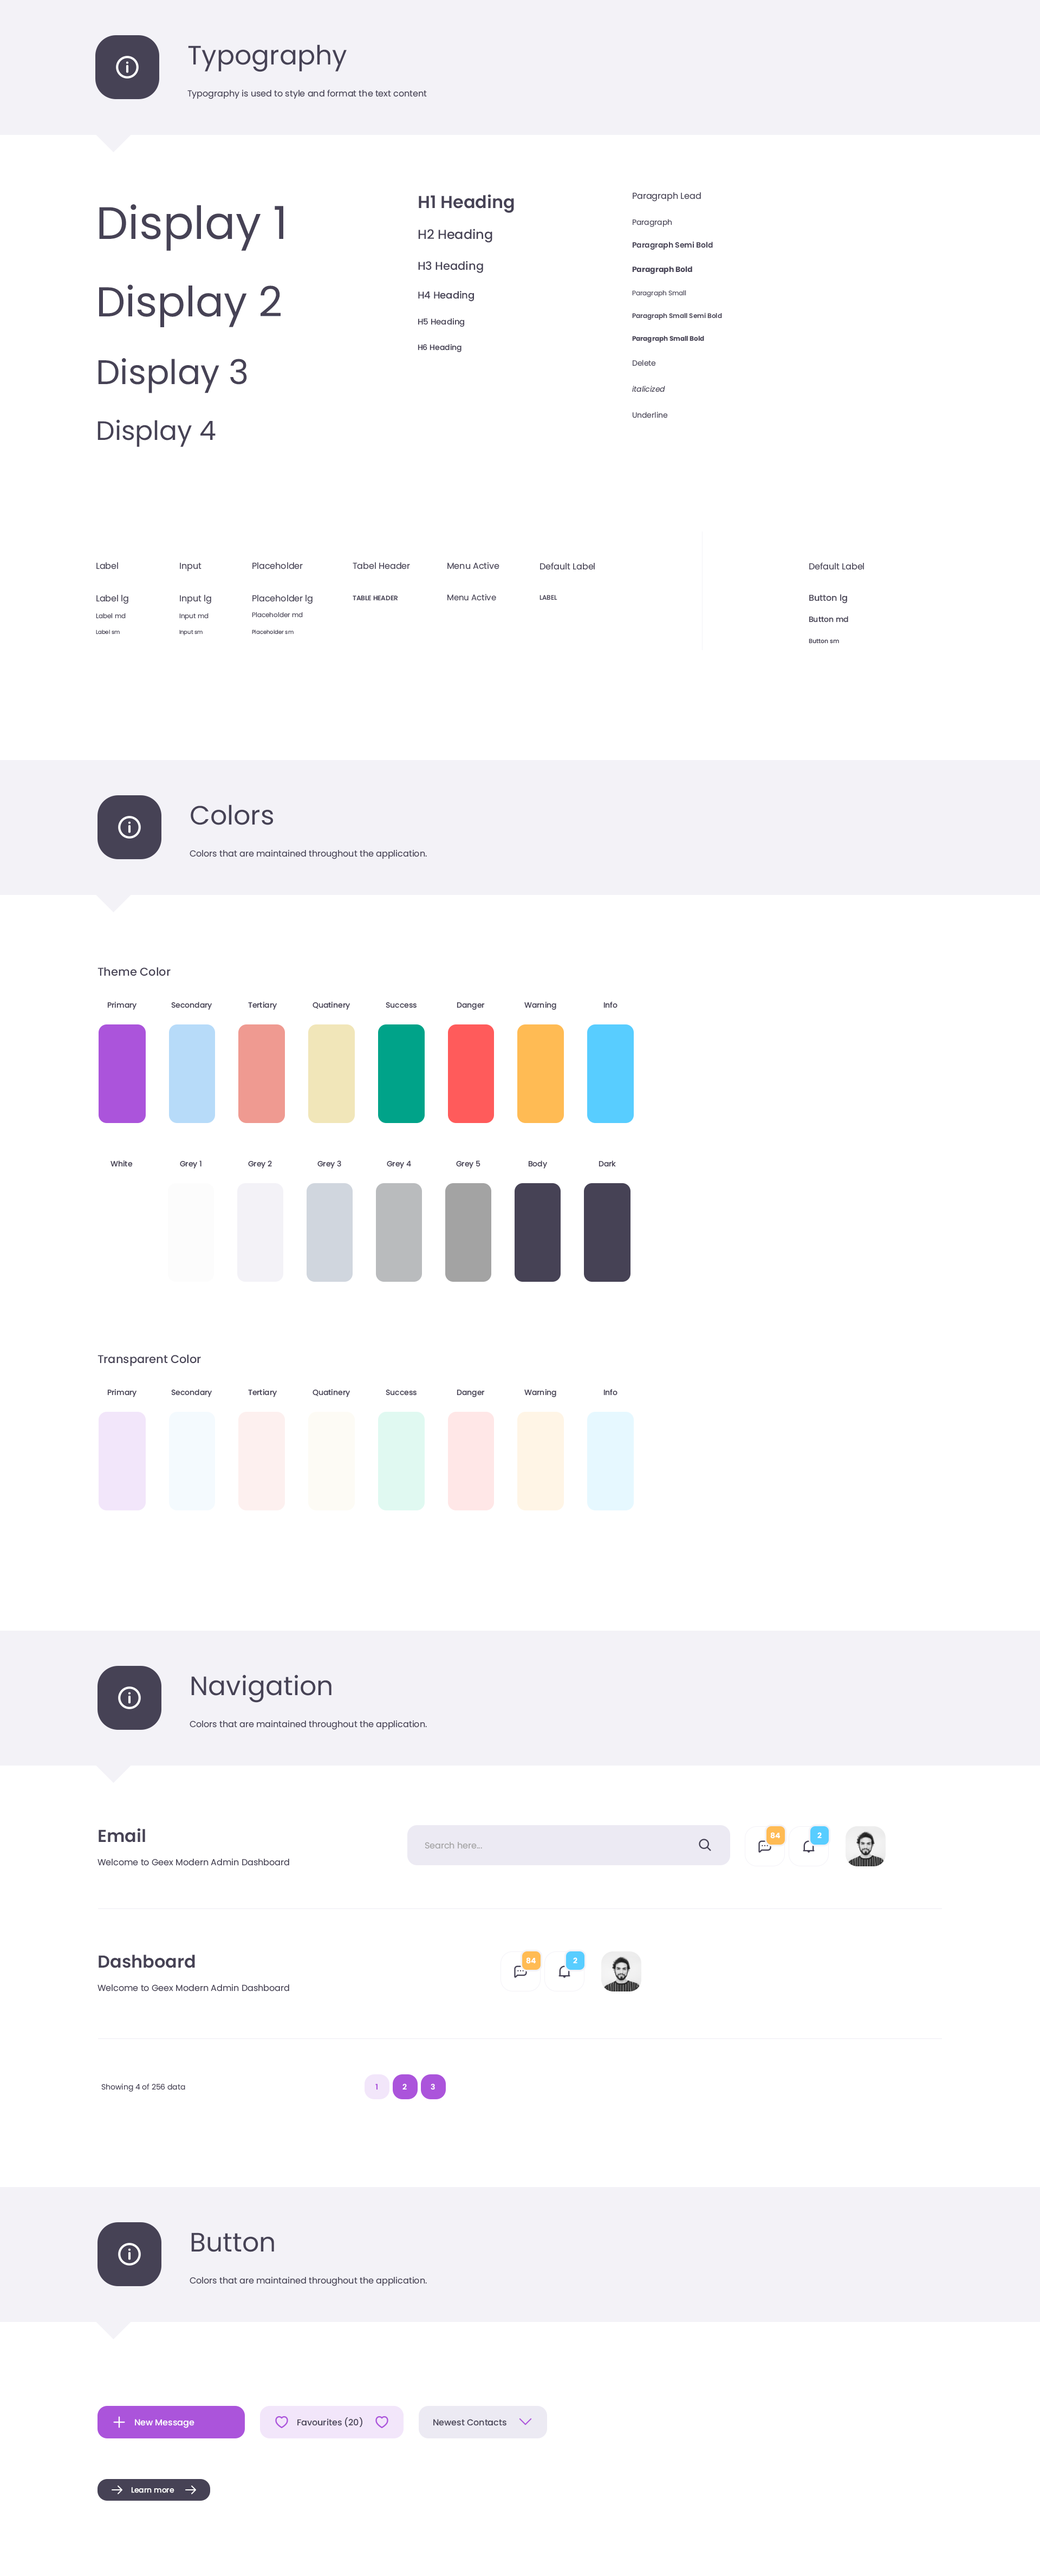
<style>
.page{position:relative;width:1040px;height:2576px;background:#ffffff}
.page>*{position:absolute;margin:0}
.t1{font:26.5px "Poppins-Regular";color:#464255}
.t2{font:8.7px "Poppins-Regular";color:#464255}
.t3{font:17.3px "Poppins-SemiBold";color:#464255}
.t4{font:45.5px "Poppins-Regular";color:#464255}
.t5{font:7.6px "Poppins-Regular";color:#464255}
.t6{font:13px "Poppins-Medium";color:#464255}
.t7{font:7.6px "Poppins-SemiBold";color:#464255}
.t8{font:11.4px "Poppins-Medium";color:#464255}
.t9{font:7.6px "Poppins-Bold";color:#464255}
.t10{font:41.7px "Poppins-Regular";color:#464255}
.t11{font:9.8px "Poppins-Medium";color:#464255}
.t12{font:6.5px "Poppins-Regular";color:#464255}
.t13{font:6.5px "Poppins-SemiBold";color:#464255}
.t14{font:8.1px "Poppins-Medium";color:#464255}
.t15{font:6.5px "Poppins-Bold";color:#464255}
.t16{font:7.6px "Poppins-Medium";color:#464255}
.t17{font:34.1px "Poppins-Regular";color:#464255}
.t18{font:7.6px "Poppins-Italic";color:#464255}
.t19{font:8.1px "Poppins-Regular";color:#464255}
.t20{font:6.5px "Poppins-SemiBold";color:#464255;text-transform:uppercase}
.t21{font:6.5px "Poppins-Medium";color:#464255;text-transform:uppercase}
.t22{font:8.7px "Poppins-Medium";color:#464255}
.t23{font:5.4px "Poppins-Regular";color:#464255}
.t24{font:6px "Poppins-Medium";color:#464255}
.t25{font:8.7px "Poppins-Regular";color:#a3a3a3}
.t26{font:7.6px "Poppins-Bold";color:#ffffff}
.t27{font:7.6px "Poppins-SemiBold";color:#ab54db}
.t28{font:7.6px "Poppins-SemiBold";color:#ffffff}
.t29{font:8.7px "Poppins-Medium";color:#ffffff}
.t30{font:7.6px "Poppins-Medium";color:#ffffff}
</style>
<div class="page">
<p class="t1" style="left:188px;top:44px;width:159px;height:28px">Typography</p>
<p class="t2" style="left:187px;top:89px;width:240px;height:10px">Typography is used to style and format the text content</p>
<p class="t3" style="left:419px;top:194px;width:95px;height:19px">H1 Heading</p>
<p class="t2" style="left:633px;top:192px;width:68px;height:10px">Paragraph Lead</p>
<p class="t4" style="left:99px;top:204px;width:184px;height:47px">Display 1</p>
<p class="t5" style="left:633px;top:219px;width:39px;height:8px">Paragraph</p>
<p class="t6" style="left:418px;top:229px;width:74px;height:14px">H2 Heading</p>
<p class="t7" style="left:632px;top:242px;width:81px;height:8px">Paragraph Semi Bold</p>
<p class="t8" style="left:418px;top:261px;width:65px;height:12px">H3 Heading</p>
<p class="t9" style="left:632px;top:266px;width:60px;height:8px">Paragraph Bold</p>
<p class="t10" style="left:99px;top:284px;width:182px;height:43px">Display 2</p>
<p class="t11" style="left:418px;top:291px;width:56px;height:10px">H4 Heading</p>
<p class="t12" style="left:632px;top:290px;width:54px;height:7px">Paragraph Small</p>
<p class="t13" style="left:632px;top:313px;width:90px;height:7px">Paragraph Small Semi Bold</p>
<p class="t14" style="left:418px;top:318px;width:46px;height:9px">H5 Heading</p>
<p class="t15" style="left:632px;top:336px;width:72px;height:7px">Paragraph Small Bold</p>
<p class="t16" style="left:418px;top:344px;width:44px;height:8px">H6 Heading</p>
<p class="t17" style="left:98px;top:358px;width:149px;height:35px">Display 3</p>
<p class="t5" style="left:633px;top:360px;width:23px;height:6px">Delete</p>
<p class="t18" style="left:632px;top:386px;width:33px;height:6px">italicized</p>
<p class="t5" style="left:632px;top:412px;width:36px;height:6px">Underline</p>
<p class="t1" style="left:98px;top:419px;width:118px;height:28px">Display 4</p>
<p class="t2" style="left:96px;top:562px;width:22px;height:7px">Label</p>
<p class="t2" style="left:180px;top:562px;width:22px;height:10px">Input</p>
<p class="t2" style="left:252px;top:562px;width:51px;height:7px">Placeholder</p>
<p class="t2" style="left:353px;top:562px;width:57px;height:7px">Tabel Header</p>
<p class="t2" style="left:447px;top:562px;width:52px;height:7px">Menu Active</p>
<p class="t2" style="left:540px;top:562px;width:55px;height:8px">Default Label</p>
<p class="t2" style="left:809px;top:562px;width:55px;height:8px">Default Label</p>
<p class="t19" style="left:447px;top:594px;width:49px;height:7px">Menu Active</p>
<p class="t2" style="left:96px;top:595px;width:32px;height:9px">Label lg</p>
<p class="t2" style="left:180px;top:595px;width:31px;height:9px">Input lg</p>
<p class="t2" style="left:252px;top:595px;width:61px;height:9px">Placeholder lg</p>
<p class="t20" style="left:353px;top:595px;width:45px;height:5px">Table Header</p>
<p class="t21" style="left:540px;top:595px;width:17px;height:5px">Label</p>
<p class="t22" style="left:809px;top:594px;width:38px;height:10px">Button lg</p>
<p class="t12" style="left:96px;top:613px;width:30px;height:6px">Label md</p>
<p class="t12" style="left:179px;top:613px;width:30px;height:7px">Input md</p>
<p class="t12" style="left:252px;top:612px;width:51px;height:6px">Placeholder md</p>
<p class="t16" style="left:809px;top:616px;width:39px;height:6px">Button md</p>
<p class="t23" style="left:96px;top:630px;width:24px;height:4px">Label sm</p>
<p class="t23" style="left:179px;top:630px;width:24px;height:5px">Input sm</p>
<p class="t23" style="left:252px;top:630px;width:42px;height:4px">Placeholder sm</p>
<p class="t24" style="left:809px;top:639px;width:30px;height:5px">Button sm</p>
<p class="t1" style="left:191px;top:804px;width:82px;height:21px">Colors</p>
<p class="t2" style="left:190px;top:849px;width:237px;height:10px">Colors that are maintained throughout the application.</p>
<p class="t8" style="left:98px;top:967px;width:73px;height:9px">Theme Color</p>
<p class="t16" style="left:107px;top:1002px;width:30px;height:8px">Primary</p>
<p class="t16" style="left:171px;top:1002px;width:41px;height:8px">Secondary</p>
<p class="t16" style="left:248px;top:1002px;width:29px;height:8px">Tertiary</p>
<p class="t16" style="left:313px;top:1002px;width:37px;height:8px">Quatinery</p>
<p class="t16" style="left:524px;top:1002px;width:32px;height:8px">Warning</p>
<p class="t16" style="left:604px;top:1002px;width:14px;height:6px">Info</p>
<p class="t16" style="left:386px;top:1002px;width:31px;height:6px">Success</p>
<p class="t16" style="left:457px;top:1002px;width:28px;height:8px">Danger</p>
<p class="t16" style="left:111px;top:1160px;width:22px;height:7px">White</p>
<p class="t16" style="left:180px;top:1160px;width:22px;height:9px">Grey 1</p>
<p class="t16" style="left:248px;top:1160px;width:24px;height:9px">Grey 2</p>
<p class="t16" style="left:317px;top:1160px;width:24px;height:9px">Grey 3</p>
<p class="t16" style="left:387px;top:1160px;width:24px;height:9px">Grey 4</p>
<p class="t16" style="left:456px;top:1160px;width:25px;height:9px">Grey 5</p>
<p class="t16" style="left:528px;top:1160px;width:19px;height:9px">Body</p>
<p class="t16" style="left:599px;top:1160px;width:17px;height:7px">Dark</p>
<p class="t8" style="left:98px;top:1354px;width:103px;height:12px">Transparent Color</p>
<p class="t16" style="left:107px;top:1389px;width:30px;height:8px">Primary</p>
<p class="t16" style="left:171px;top:1389px;width:41px;height:8px">Secondary</p>
<p class="t16" style="left:248px;top:1389px;width:29px;height:8px">Tertiary</p>
<p class="t16" style="left:313px;top:1389px;width:37px;height:8px">Quatinery</p>
<p class="t16" style="left:386px;top:1390px;width:31px;height:6px">Success</p>
<p class="t16" style="left:457px;top:1390px;width:28px;height:7px">Danger</p>
<p class="t16" style="left:524px;top:1389px;width:32px;height:8px">Warning</p>
<p class="t16" style="left:604px;top:1389px;width:14px;height:7px">Info</p>
<p class="t1" style="left:191px;top:1675px;width:141px;height:28px">Navigation</p>
<p class="t2" style="left:190px;top:1720px;width:237px;height:10px">Colors that are maintained throughout the application.</p>
<p class="t3" style="left:99px;top:1828px;width:46px;height:14px">Email</p>
<p class="t25" style="left:425px;top:1842px;width:57px;height:7px">Search here...</p>
<p class="t26" style="left:770px;top:1832px;width:10px;height:7px">84</p>
<p class="t26" style="left:817px;top:1832px;width:5px;height:6px">2</p>
<p class="t2" style="left:98px;top:1858px;width:191px;height:8px">Welcome to Geex Modern Admin Dashboard</p>
<p class="t3" style="left:99px;top:1955px;width:96px;height:13px">Dashboard</p>
<p class="t26" style="left:526px;top:1957px;width:10px;height:7px">84</p>
<p class="t26" style="left:573px;top:1957px;width:5px;height:6px">2</p>
<p class="t2" style="left:98px;top:1984px;width:191px;height:7px">Welcome to Geex Modern Admin Dashboard</p>
<p class="t5" style="left:101px;top:2084px;width:84px;height:8px">Showing 4 of 256 data</p>
<p class="t27" style="left:375px;top:2084px;width:3px;height:6px">1</p>
<p class="t28" style="left:403px;top:2084px;width:4px;height:6px">2</p>
<p class="t28" style="left:431px;top:2084px;width:4px;height:6px">3</p>
<p class="t1" style="left:191px;top:2233px;width:83px;height:19px">Button</p>
<p class="t2" style="left:190px;top:2276px;width:237px;height:10px">Colors that are maintained throughout the application.</p>
<p class="t22" style="left:297px;top:2417px;width:65px;height:10px">Favourites (20)</p>
<p class="t29" style="left:135px;top:2419px;width:59px;height:9px">New Message</p>
<p class="t22" style="left:433px;top:2419px;width:74px;height:7px">Newest Contacts</p>
<p class="t30" style="left:131px;top:2487px;width:43px;height:6px">Learn more</p>
</div>
